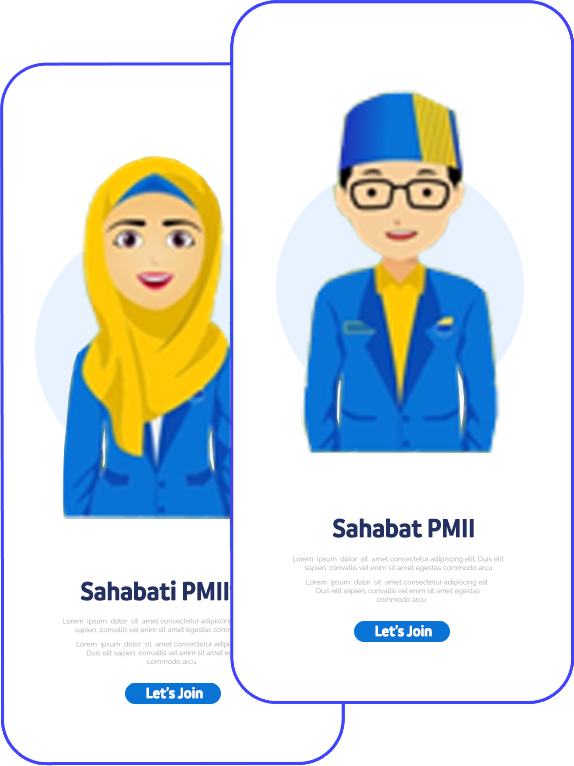
<style>
.page{position:relative;width:574px;height:766px;background:#ffffff}
.page>*{position:absolute;margin:0}
.t1{font:28px "BrandingSF-NarrowBold";color:#233064}
.t2{font:16px "BrandingSF-NarrowBold";color:#ffffff}
</style>
<div class="page">
<p class="t1" style="left:332px;top:518px;width:142px;height:20px">Sahabat PMII</p>
<p class="t1" style="left:80px;top:580px;width:149px;height:21px">Sahabati PMII</p>
<p class="t2" style="left:375px;top:624px;width:57px;height:13px">Let’s Join</p>
<p class="t2" style="left:146px;top:686px;width:57px;height:13px">Let’s Join</p>
</div>
